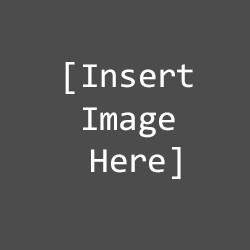
<style>
.page{position:relative;width:250px;height:250px;background:#4c4c4c}
.page>*{position:absolute;margin:0}
.t1{font:35.3px "Consolas";color:#ffffff}
</style>
<div class="page">
<p class="t1" style="left:65px;top:62px;width:128px;height:117px;text-align:center">[Insert Image<br> Here]</p>
</div>
